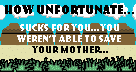
<style>
.page{position:relative;width:136px;height:72px;background:#13c9e1}
.page>*{position:absolute;margin:0}
.t1{font:12px "ShowcardGothic-Reg";color:#000000}
.t2{font:9px "ShowcardGothic-Reg";color:#ffffff}
.t3{font:9px "ShowcardGothic-Reg";color:#000000}
</style>
<div class="page">
<p class="t1" style="left:5px;top:5px;width:129px;height:10px">How Unfortunate...</p>
<p class="t2" style="left:17px;top:24px;width:104px;height:29px;text-align:center">Sucks for you...you<br>weren’t able to save <br><span class="t3">your mother...</span></p>
</div>
